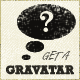
<style>
.page{position:relative;width:80px;height:80px}
.page>*{position:absolute;margin:0}
.t1{font:14px "Brisa";letter-spacing:0.01em;color:#53524a}
.t2{font:12px "SketchRockwell";letter-spacing:-0.025em;color:#282620}
</style>
<div class="page">
<p class="t1" style="left:42px;top:51px;width:29px;height:10px">GET A</p>
<p class="t2" style="left:6px;top:65px;width:68px;height:10px">GRAVATAR</p>
</div>
